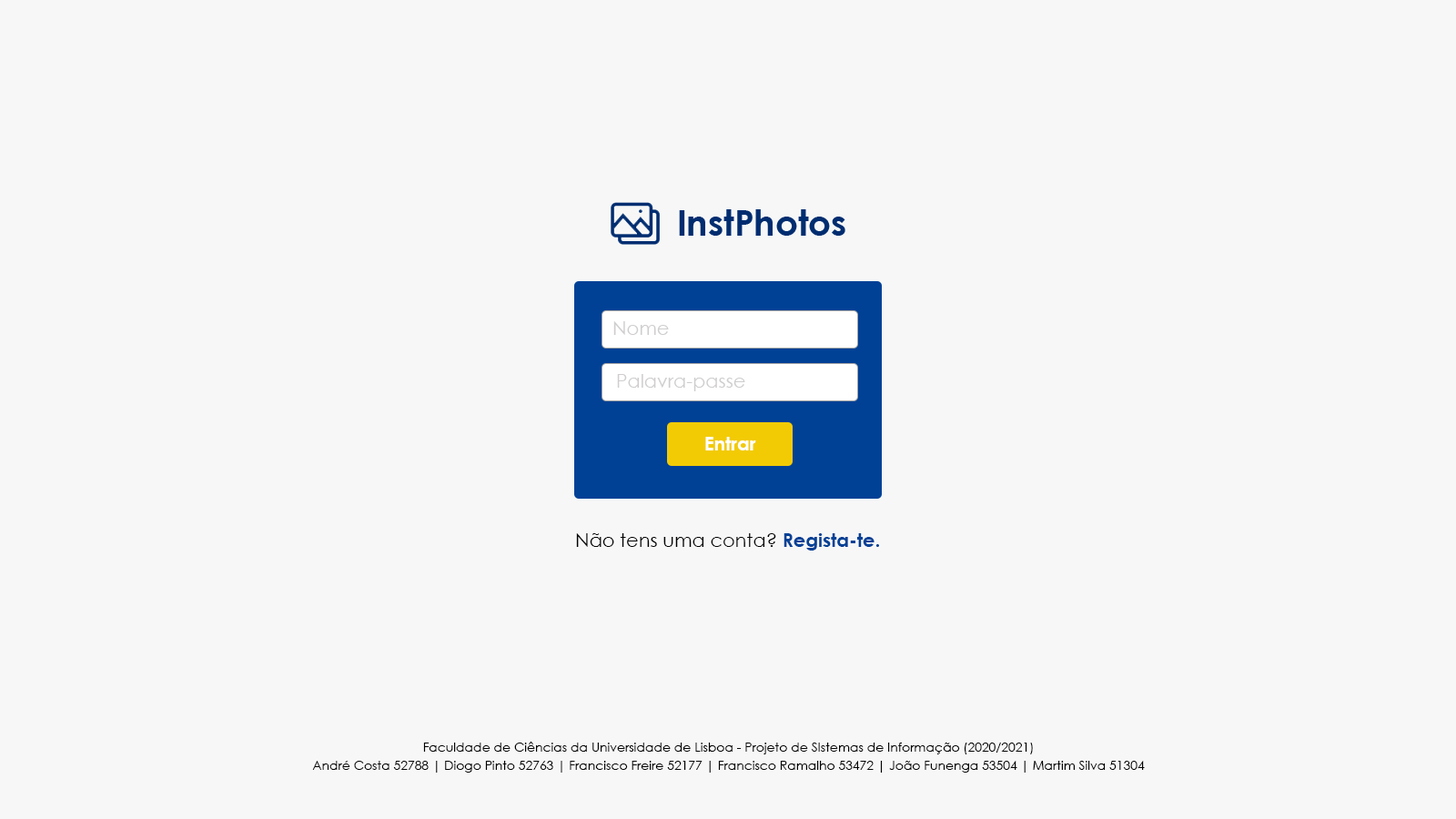
<style>
.page{position:relative;width:1456px;height:819px;background:#f7f7f7}
.page>*{position:absolute;margin:0}
.t1{font:19px "CenturyGothic";color:#cfcdcd}
.t2{font:19px "CenturyGothic-Bold";color:#ffffff}
.t3{font:19px "CenturyGothic";color:#000000}
.t4{font:19px "CenturyGothic-Bold";color:#004196}
.t5{font:12.7px "CenturyGothic";color:#000000}
</style>
<div class="page">
<p class="t1" style="left:613px;top:321px;width:56px;height:14px">Nome</p>
<p class="t1" style="left:617px;top:374px;width:128px;height:17px">Palavra-passe</p>
<p class="t2" style="left:705px;top:437px;width:51px;height:13px">Entrar</p>
<p class="t3" style="left:576px;top:533px;width:303px;height:18px">Não tens uma conta? <span class="t4">Regista-te.</span></p>
<p class="t5" style="left:423px;top:742px;width:610px;height:12px">Faculdade de Ciências da Universidade de Lisboa - Projeto de SIstemas de Informação (2020/2021)</p>
<p class="t5" style="left:312px;top:761px;width:833px;height:12px">André Costa 52788 | Diogo Pinto 52763 | Francisco Freire 52177 | Francisco Ramalho 53472 | João Funenga 53504 | Martim Silva 51304</p>
</div>
